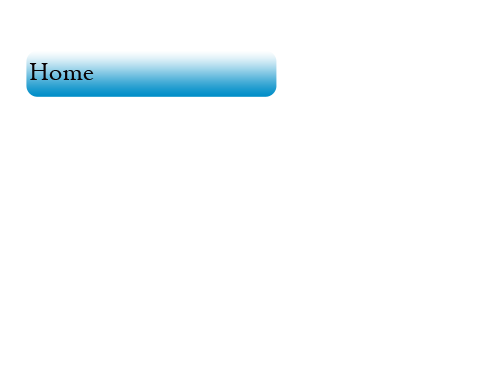
<style>
.page{position:relative;width:500px;height:374px;background:#ffffff}
.page>*{position:absolute;margin:0}
.t1{font:26.4px "GoudyOldStyleT-Regular";color:#090204}
</style>
<div class="page">
<p class="t1" style="left:29px;top:63px;width:65px;height:17px">Home</p>
</div>
